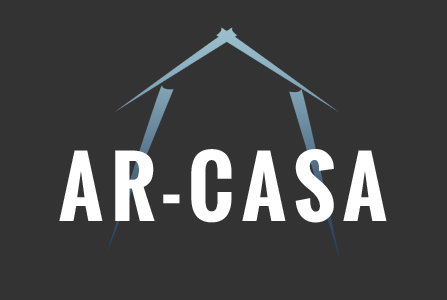
<style>
.page{position:relative;width:447px;height:300px;background:#333333}
.page>*{position:absolute;margin:0}
.t1{font:80.3px "Oswald-Bold";letter-spacing:0.1em;color:#ffffff}
</style>
<div class="page">
<p class="t1" style="left:59px;top:149px;width:328px;height:74px">AR-CASA</p>
</div>
